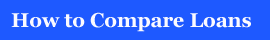
<style>
.page{position:relative;width:270px;height:40px;background:#1e59ff}
.page>*{position:absolute;margin:0}
.t1{font:20px "Georgia-Bold";color:#fbfaff}
</style>
<div class="page">
<p class="t1" style="left:11px;top:12px;width:240px;height:20px">How to Compare Loans</p>
</div>
